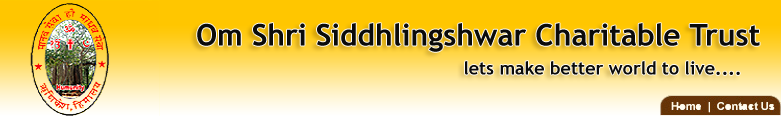
<style>
.page{position:relative;width:781px;height:116px;background:#ffc600}
.page>*{position:absolute;margin:0}
.t1{font:30px "TrebuchetMS-Bold";color:#0b0b0a}
.t2{font:18px "TrebuchetMS-Bold";color:#0b0b0a}
</style>
<div class="page">
<p class="t1" style="left:197px;top:23px;width:563px;height:52px">Om Shri Siddhlingshwar Charitable Trust<br>                                     <span class="t2">lets make better world to live....</span></p>
</div>
